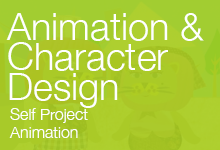
<style>
.page{position:relative;width:220px;height:150px}
.page>*{position:absolute;margin:0}
.t1{font:38px/30px "HelveticaNeue-Light";color:#ffffff}
.t2{font:16px/18px "HelveticaNeue-Light";color:#ffffff}
</style>
<div class="page">
<p class="t1" style="left:6px;top:13px;width:198px;height:95px">Animation &amp;<br>Character<br>Design</p>
<p class="t2" style="left:9px;top:108px;width:79px;height:30px">Self Project<br>Animation</p>
</div>
